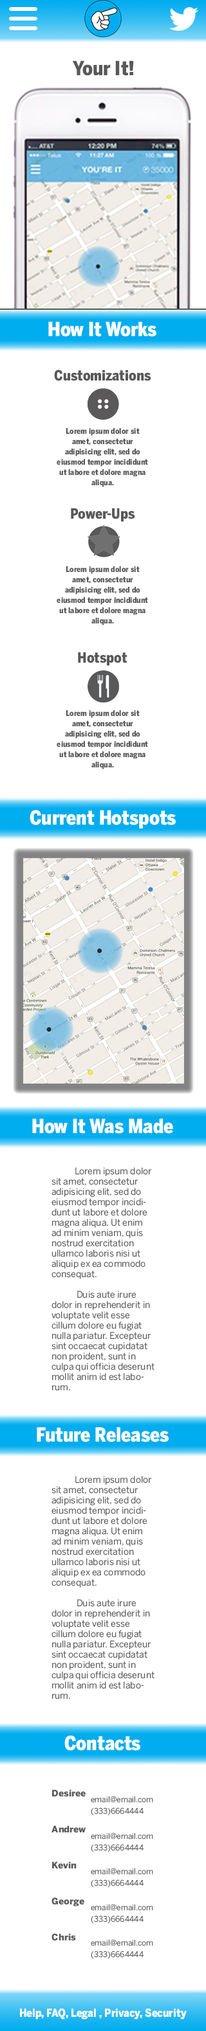
<style>
.page{position:relative;width:206px;height:2031px;background:#ffffff}
.page>*{position:absolute;margin:0}
.t1{font:19.3px "BentonSansCond-Black";color:#595959}
.t2{font:19.3px "BentonSansCond-Black";color:#ffffff}
.t3{font:14.1px "BentonSansCond-Black";color:#595959}
.t4{font:7.7px/10.3px "BentonSansCond-Black";color:#595959}
.t5{font:9px/10.3px "BentonSans-Book";color:#595959}
.t6{font:9px/18px "BentonSans-Black";color:#595959}
.t7{font:7.7px/11.6px "BentonSans-Book";color:#595959}
.t8{font:11.1px "BentonSans-Black";color:#ffffff;scale:0.87 1}
</style>
<div class="page">
<p class="t1" style="left:73px;top:60px;width:61px;height:16px">Your It!</p>
<p class="t2" style="left:48px;top:321px;width:108px;height:16px">How It Works</p>
<p class="t3" style="left:54px;top:370px;width:97px;height:11px">Customizations</p>
<p class="t4" style="left:57px;top:428px;width:91px;height:59px;text-align:center">Lorem ipsum dolor sit amet, consectetur <br>adipisicing elit, sed do eiusmod tempor incididunt ut labore et dolore magna aliqua.</p>
<p class="t3" style="left:71px;top:508px;width:64px;height:14px">Power-Ups</p>
<p class="t4" style="left:57px;top:566px;width:91px;height:60px;text-align:center">Lorem ipsum dolor sit amet, consectetur <br>adipisicing elit, sed do eiusmod tempor incididunt ut labore et dolore magna aliqua.</p>
<p class="t3" style="left:78px;top:652px;width:49px;height:14px">Hotspot</p>
<p class="t4" style="left:57px;top:710px;width:91px;height:60px;text-align:center">Lorem ipsum dolor sit amet, consectetur <br>adipisicing elit, sed do eiusmod tempor incididunt ut labore et dolore magna aliqua.</p>
<p class="t2" style="left:30px;top:810px;width:146px;height:19px">Current Hotspots</p>
<p class="t2" style="left:32px;top:1119px;width:141px;height:15px">How It Was Made</p>
<p class="t5" style="left:51px;top:1167px;width:103px;height:224px">Lorem ipsum dolor sit amet, consectetur adipisicing elit, sed do eiusmod tempor incididunt ut labore et dolore magna aliqua. Ut enim ad minim veniam, quis nostrud exercitation ullamco laboris nisi ut aliquip ex ea commodo consequat.<br><br>  Duis aute irure dolor in reprehenderit in voluptate velit esse cillum dolore eu fugiat nulla pariatur. Excepteur sint occaecat cupidatat non proident, sunt in culpa qui officia deserunt mollit anim id est laborum.</p>
<p class="t2" style="left:37px;top:1427px;width:131px;height:16px">Future Releases</p>
<p class="t5" style="left:51px;top:1476px;width:103px;height:224px">Lorem ipsum dolor sit amet, consectetur adipisicing elit, sed do eiusmod tempor incididunt ut labore et dolore magna aliqua. Ut enim ad minim veniam, quis nostrud exercitation ullamco laboris nisi ut aliquip ex ea commodo consequat.<br><br>  Duis aute irure dolor in reprehenderit in voluptate velit esse cillum dolore eu fugiat nulla pariatur. Excepteur sint occaecat cupidatat non proident, sunt in culpa qui officia deserunt mollit anim id est laborum.</p>
<p class="t2" style="left:64px;top:1736px;width:76px;height:15px">Contacts</p>
<p class="t6" style="left:51px;top:1790px;width:35px;height:151px">Desiree<br><br>Andrew<br><br>Kevin<br><br>George<br><br>Chris</p>
<p class="t7" style="left:91px;top:1796px;width:62px;height:20px">email@email.com<br>(333)6664444</p>
<p class="t7" style="left:91px;top:1833px;width:62px;height:20px">email@email.com<br>(333)6664444</p>
<p class="t7" style="left:91px;top:1868px;width:62px;height:20px">email@email.com<br>(333)6664444</p>
<p class="t7" style="left:91px;top:1904px;width:62px;height:20px">email@email.com<br>(333)6664444</p>
<p class="t7" style="left:91px;top:1940px;width:62px;height:19px">email@email.com<br>(333)6664444</p>
<p class="t8" style="left:20px;top:2009px;width:166px;height:11px">Help, FAQ, Legal , Privacy, Security</p>
</div>
